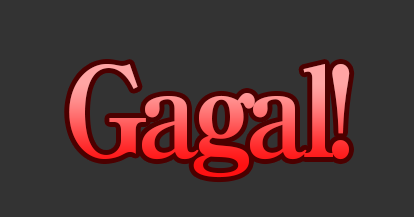
<style>
.page{position:relative;width:414px;height:217px;background:#333333}
.page>*{position:absolute;margin:0}
.t1{font:125px "RyuminPro-ExBold";letter-spacing:-0.08em;scale:0.9 1}
</style>
<div class="page">
<p class="t1" style="left:69px;top:64px;width:281px;height:114px">Gagal!</p>
</div>
